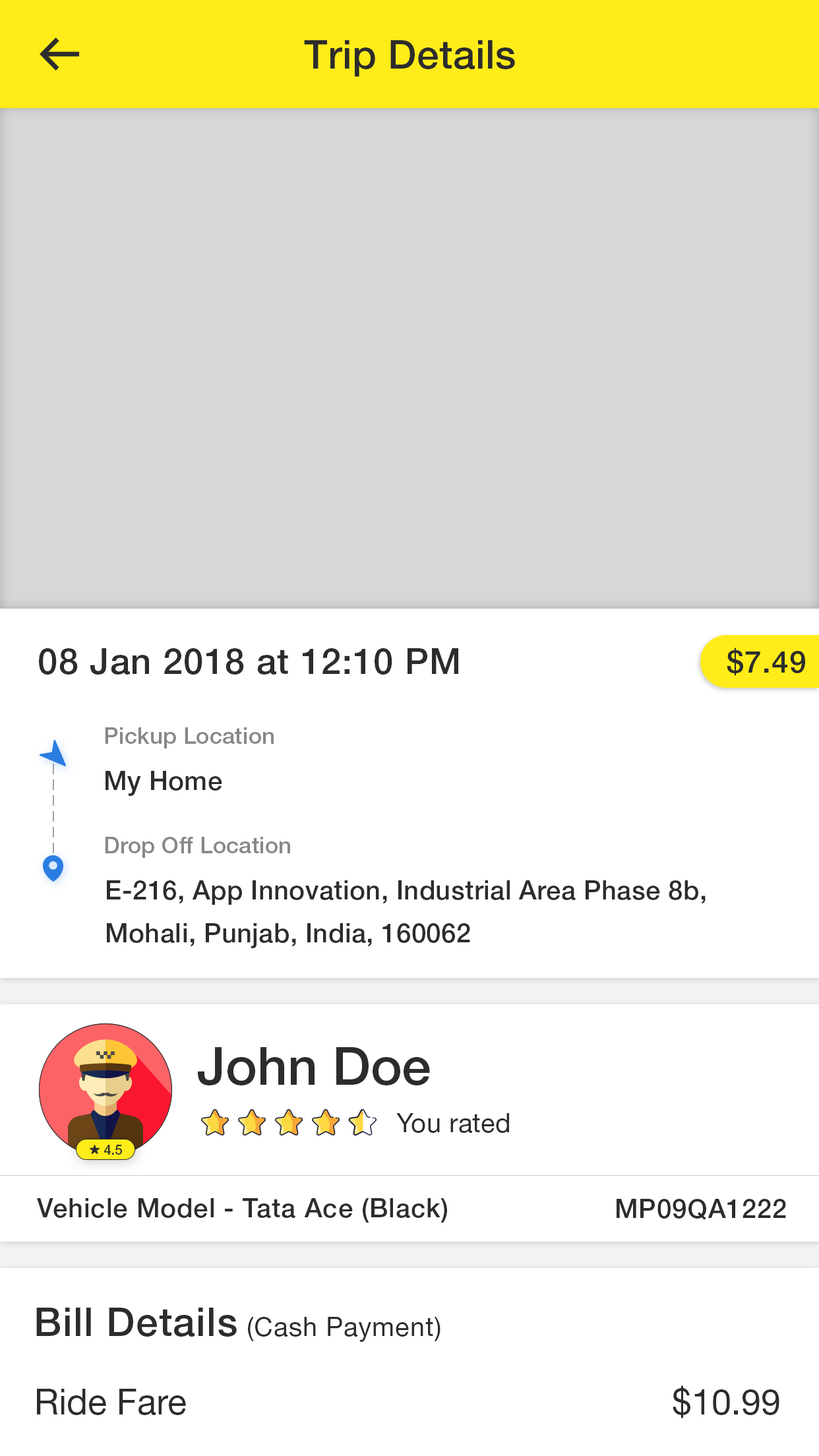
<style>
.page{position:relative;width:819px;height:1456px;background:#ffffff}
.page>*{position:absolute;margin:0}
.t1{font:39.6px "HelveticaNeueLTStd-Md";letter-spacing:0.01em;color:#2c2c2c}
.t2{font:35.6px "HelveticaNeueLTStd-Md";letter-spacing:0.025em;color:#2c2c2c}
.t3{font:30.3px "HelveticaNeueLTStd-Md";letter-spacing:0.025em;color:#2c2c2c}
.t4{font:22.4px "HelveticaNeueLTStd-Md";letter-spacing:0.01em;color:#888888}
.t5{font:26.4px "HelveticaNeueLTStd-Md";letter-spacing:0.01em;color:#2c2c2c}
.t6{font:26.4px/42.9px "HelveticaNeueLTStd-Md";letter-spacing:0.01em;color:#2c2c2c}
.t7{font:52.8px "HelveticaNeueLTStd-Md";color:#2c2c2c}
.t8{font:26.4px "HelveticaNeueLTStd-Roman";letter-spacing:0.01em;color:#2c2c2c}
.t9{font:13.2px "HelveticaNeueLTStd-Md";color:#2c2c2c}
.t10{font:26.4px "HelveticaNeueLTStd-Md";letter-spacing:0.025em;color:#2c2c2c}
.t11{font:26.4px "HelveticaNeueLTStd-Roman";letter-spacing:0.025em;color:#2c2c2c}
.t12{font:39.6px "HelveticaNeueLTStd-Md";letter-spacing:0.025em;color:#2c2c2c}
.t13{font:35.6px "HelveticaNeueLTStd-Roman";color:#2c2c2c}
</style>
<div class="page">
<p class="t1" style="left:304px;top:40px;width:211px;height:36px">Trip Details</p>
<p class="t2" style="left:39px;top:648px;width:419px;height:27px">08 Jan 2018 at 12:10 PM</p>
<p class="t3" style="left:727px;top:648px;width:78px;height:28px">$7.49</p>
<p class="t4" style="left:105px;top:727px;width:169px;height:21px">Pickup Location</p>
<p class="t5" style="left:106px;top:771px;width:116px;height:25px">My Home</p>
<p class="t4" style="left:105px;top:837px;width:185px;height:21px">Drop Off Location</p>
<p class="t6" style="left:107px;top:880px;width:599px;height:68px">E-216, App Innovation, Industrial Area Phase 8b,<br>Mohali, Punjab, India, 160062</p>
<p class="t7" style="left:198px;top:1047px;width:232px;height:38px">John Doe</p>
<p class="t8" style="left:396px;top:1113px;width:113px;height:20px">You rated</p>
<p class="t9" style="left:104px;top:1145px;width:18px;height:10px">4.5</p>
<p class="t10" style="left:37px;top:1198px;width:410px;height:25px">Vehicle Model - Tata Ace (Black)</p>
<p class="t10" style="left:617px;top:1199px;width:169px;height:21px">MP09QA1222</p>
<p class="t11" style="left:36px;top:1308px;width:404px;height:34px"><span class="t12">Bill Details</span> (Cash Payment)</p>
<p class="t13" style="left:37px;top:1385px;width:742px;height:33px">Ride Fare                                                 $10.99</p>
</div>
